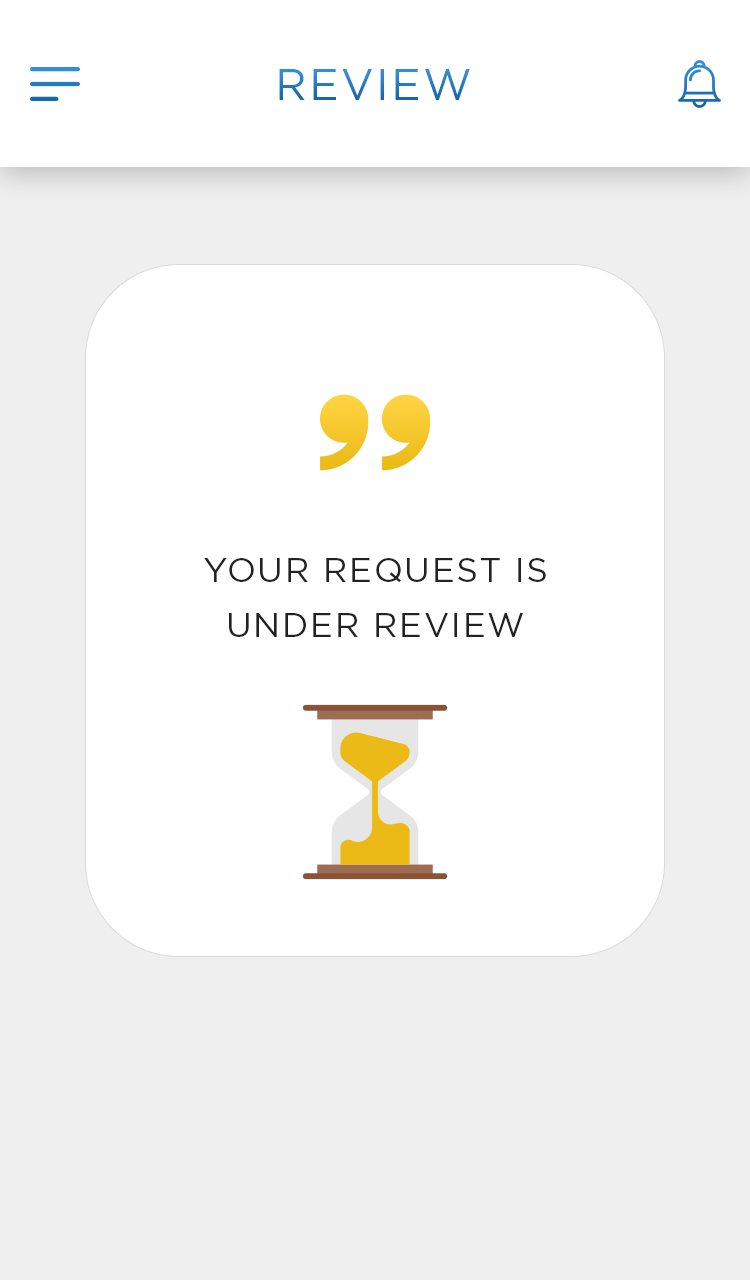
<style>
.page{position:relative;width:750px;height:1280px;background:#ffffff}
.page>*{position:absolute;margin:0}
.t1{font:44px "Gotham-Book";letter-spacing:0.05em;text-transform:uppercase}
.t2{font:34px/55px "Gotham-Book";letter-spacing:0.05em;color:#222222;text-transform:uppercase}
</style>
<div class="page">
<p class="t1" style="left:279px;top:69px;width:191px;height:31px">REVIEW</p>
<p class="t2" style="left:204px;top:558px;width:342px;height:79px;text-align:center">Your request is<br>under review</p>
</div>
